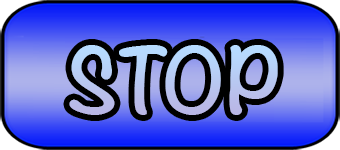
<style>
.page{position:relative;width:340px;height:150px}
.page>*{position:absolute;margin:0}
.t1{font:80px "Noteworthy-Bold";color:#b8ccf4}
</style>
<div class="page">
<p class="t1" style="left:69px;top:45px;width:209px;height:70px">STOP</p>
</div>
